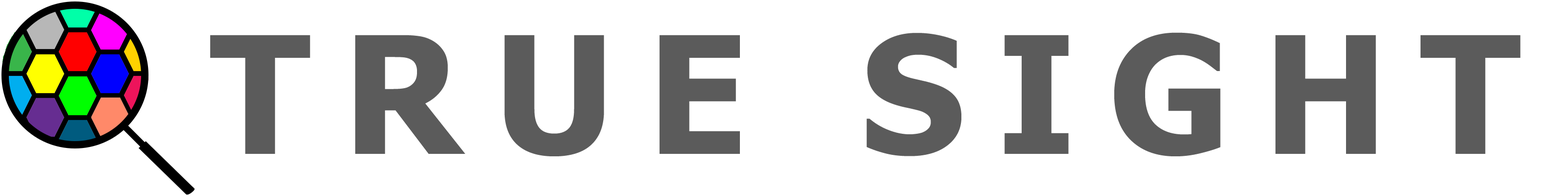
<style>
.page{position:relative;width:1568px;height:196px;background:#ffffff}
.page>*{position:absolute;margin:0}
.t1{font:163.3px "Tahoma-Bold";letter-spacing:0.2em;color:#5b5b5b;text-transform:uppercase}
</style>
<div class="page">
<p class="t1" style="left:210px;top:32px;width:1310px;height:124px">TRue Sight</p>
</div>
